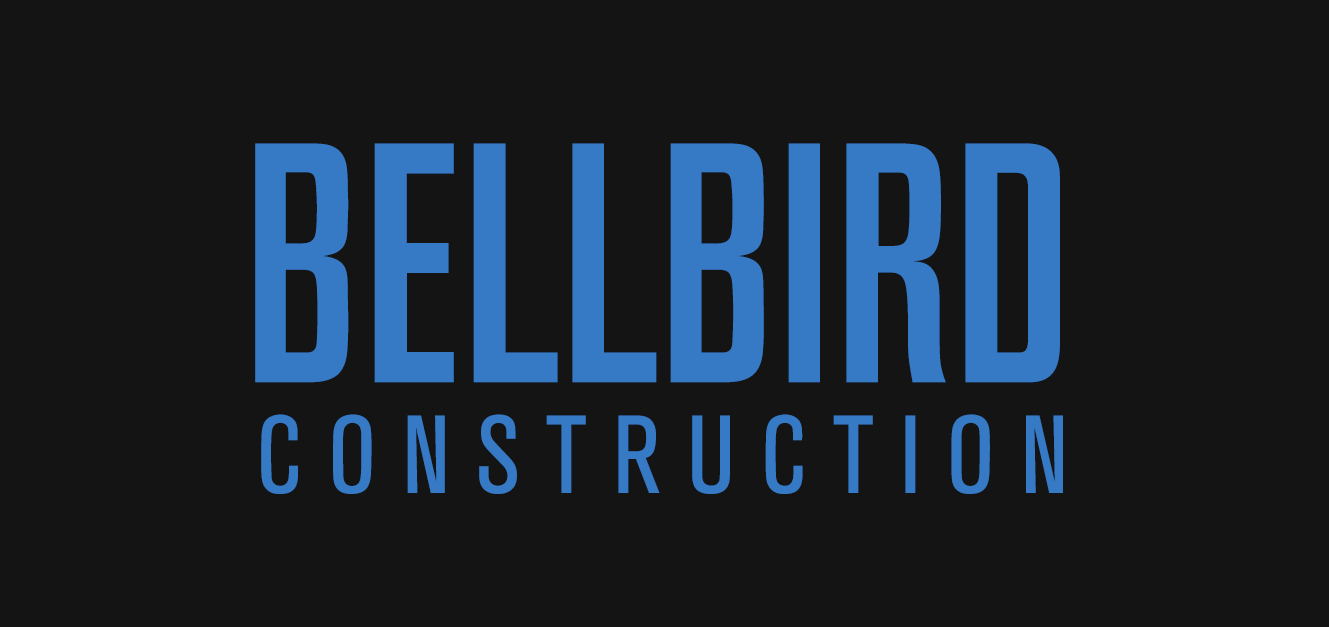
<style>
.page{position:relative;width:1329px;height:627px;background:#141414}
.page>*{position:absolute;margin:0}
.t1{font:337.9px "AkzidenzGroteskBQ-MdCndAlt";color:#367ac6}
.t2{font:109.3px "AkzidenzGroteskBQ-Cnd";letter-spacing:0.24em;color:#367ac6}
</style>
<div class="page">
<p class="t1" style="left:255px;top:143px;width:805px;height:240px">BELLBIRD</p>
<p class="t2" style="left:261px;top:414px;width:802px;height:80px">CONSTRUCTION</p>
</div>
